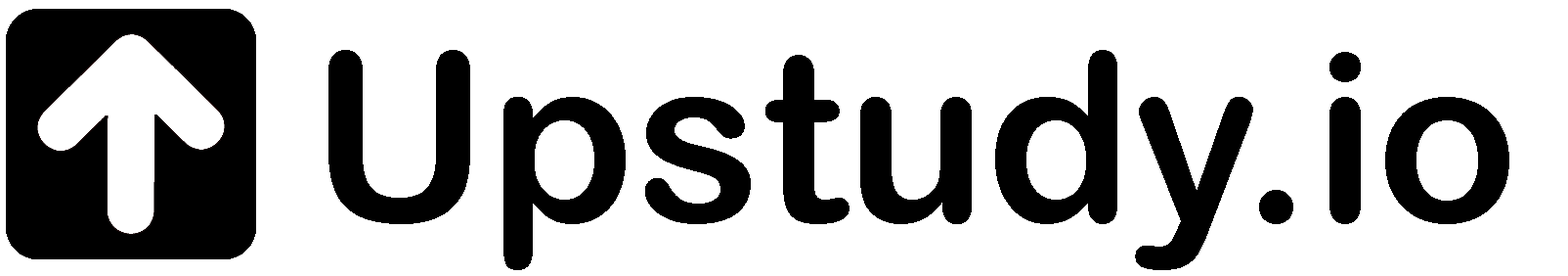
<style>
.page{position:relative;width:1568px;height:276px;background:#ffffff}
.page>*{position:absolute;margin:0}
.t1{font:234.6px "ArialRoundedMTBold";color:#000000}
</style>
<div class="page">
<p class="t1" style="left:328px;top:50px;width:1181px;height:220px">Upstudy.io</p>
</div>
